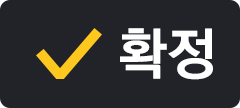
<style>
.page{position:relative;width:240px;height:108px;background:#212328}
.page>*{position:absolute;margin:0}
.t1{font:55px "KoPubDotumBold";color:#ffffff;font-weight:bold}
</style>
<div class="page">
<p class="t1" style="left:120px;top:28px;width:93px;height:52px">확정</p>
</div>
